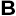
<style>
.page{position:relative;width:16px;height:16px;background:#000000}
.page>*{position:absolute;margin:0}
.t1{font:20.7px "Montserrat-Bold";color:#000000}
</style>
<div class="page">
<p class="t1" style="left:1px;top:0px;width:14px;height:15px">B</p>
</div>
